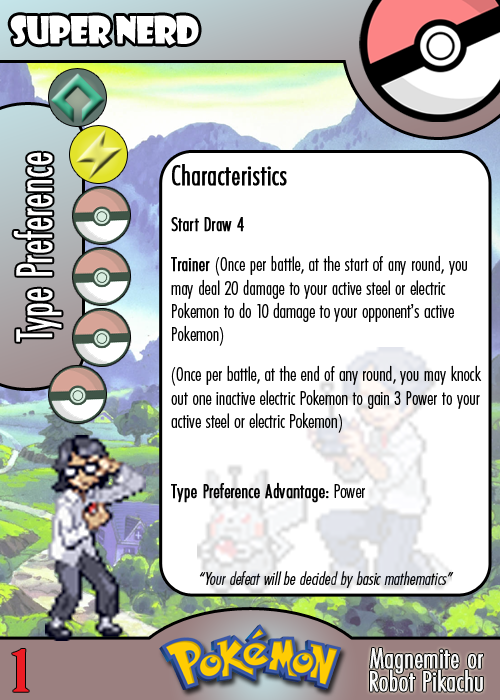
<style>
.page{position:relative;width:500px;height:700px;background:#ffffff}
.page>*{position:absolute;margin:0}
.t1{font:36.7px "ShowcardGothic-Reg";letter-spacing:-0.025em;color:#ffffff;scale:0.91 1}
.t2{font:46.7px "Futura-CondensedLight";color:#ffffff;font-weight:bold;scale:0.83 1}
.t3{font:19.4px "FuturaCondensedBQ-Light";color:#010101}
.t4{font:27.8px "FuturaCondensedBQ-Light";color:#010101;font-weight:bold}
.t5{font:19.4px "FuturaCondensedBQ-Light";color:#010101;font-weight:bold}
.t6{font:18.1px "FuturaCondensedBQ-Light";color:#010101;font-style:italic}
.t7{font:55.6px "BirchStd";color:#ed1c24;font-weight:bold;scale:1.5 1}
.t8{font:27.8px "FuturaCondensedBQ-Light";color:#f9f9f9;font-weight:bold}
</style>
<div class="page">
<p class="t1" style="left:10px;top:15px;width:189px;height:31px">Super Nerd</p>
<p class="t2" style="left:13px;top:152px;width:49px;height:190px;rotate:-90deg">Type Preference</p>
<p class="t3" style="left:171px;top:164px;width:311px;height:339px"><span class="t4">Characteristics<br></span><span class="t5"><br>Start Draw 4<br><br>Trainer </span>(Once per battle, at the start of any round, you may deal 20 damage to your active steel or electric Pokemon to do 10 damage to your opponent’s active Pokemon)<br><br>(Once per battle, at the end of any round, you may knock out one inactive electric Pokemon to gain 3 Power to your active steel or electric Pokemon)<br><br><br><span class="t5">Type Preference Advantage:</span> Power</p>
<p class="t6" style="left:199px;top:571px;width:255px;height:17px">“Your defeat will be decided by basic mathematics”</p>
<p class="t7" style="left:12px;top:649px;width:17px;height:43px">1</p>
<p class="t8" style="left:370px;top:648px;width:113px;height:26px">Magnemite or</p>
<p class="t8" style="left:370px;top:669px;width:113px;height:23px">Robot Pikachu</p>
</div>
